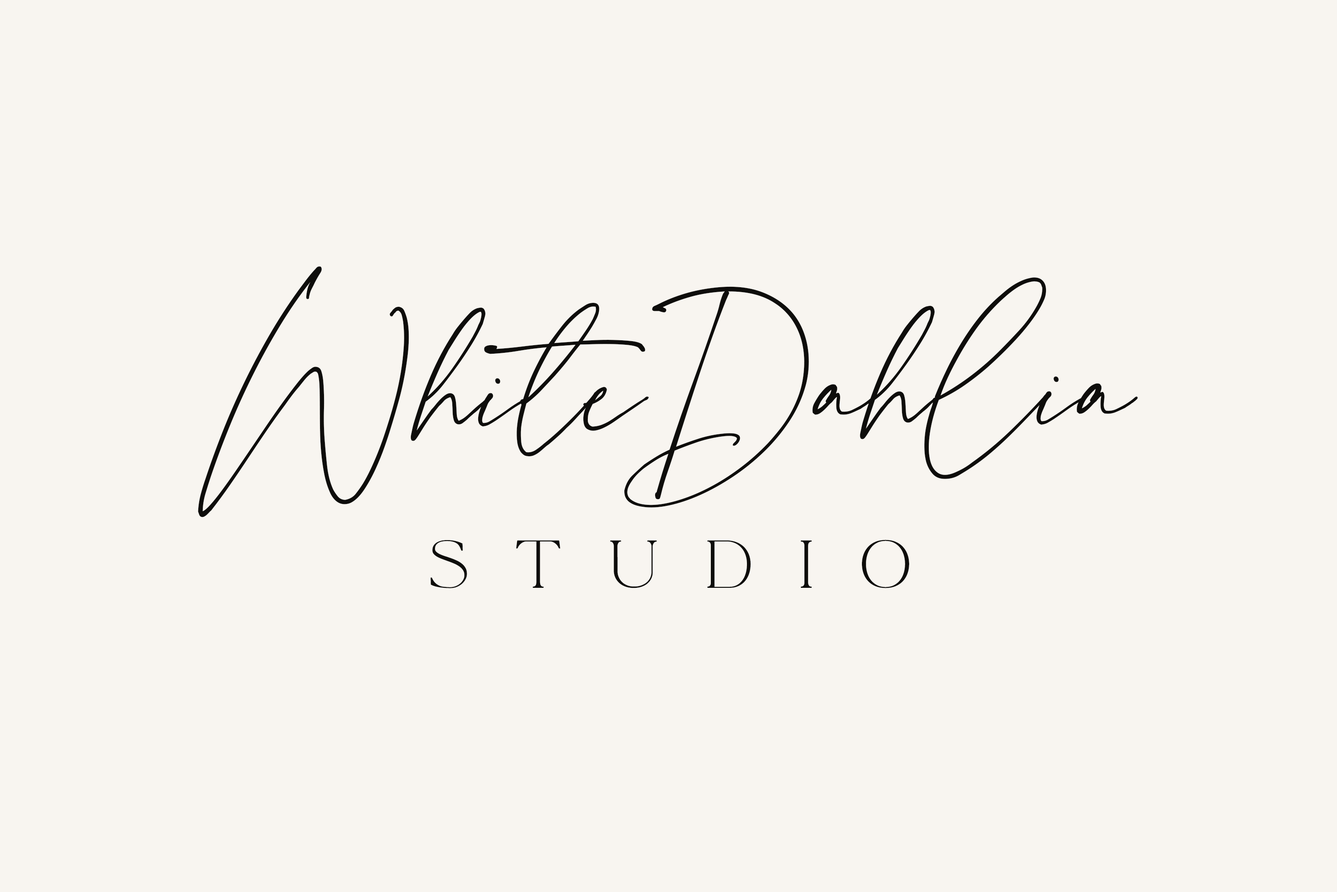
<style>
.page{position:relative;width:1337px;height:892px;background:#f8f5f0}
.page>*{position:absolute;margin:0}
.t1{font:246px "LaLuxesScript";color:#0e0d0b}
.t2{font:242.3px "LaLuxesScript";color:#0e0d0b}
.t3{font:246px "LaLuxesScript";letter-spacing:-0.04em;color:#0e0d0b}
.t4{font:59.1px "LaLuxesSerif";letter-spacing:0.76em;color:#0e0d0b}
</style>
<div class="page">
<p class="t1" style="left:198px;top:266px;width:940px;height:251px"><span class="t2">W</span>hit<span class="t3">e</span><span class="t2">D</span>ahlia</p>
<p class="t4" style="left:431px;top:539px;width:478px;height:49px">studio</p>
</div>
